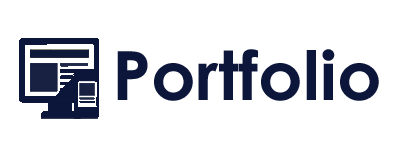
<style>
.page{position:relative;width:400px;height:150px;background:#ffffff}
.page>*{position:absolute;margin:0}
.t1{font:67.9px "CenturyGothic-Bold";color:#0c163a}
</style>
<div class="page">
<p class="t1" style="left:117px;top:49px;width:262px;height:52px">Portfolio</p>
</div>
